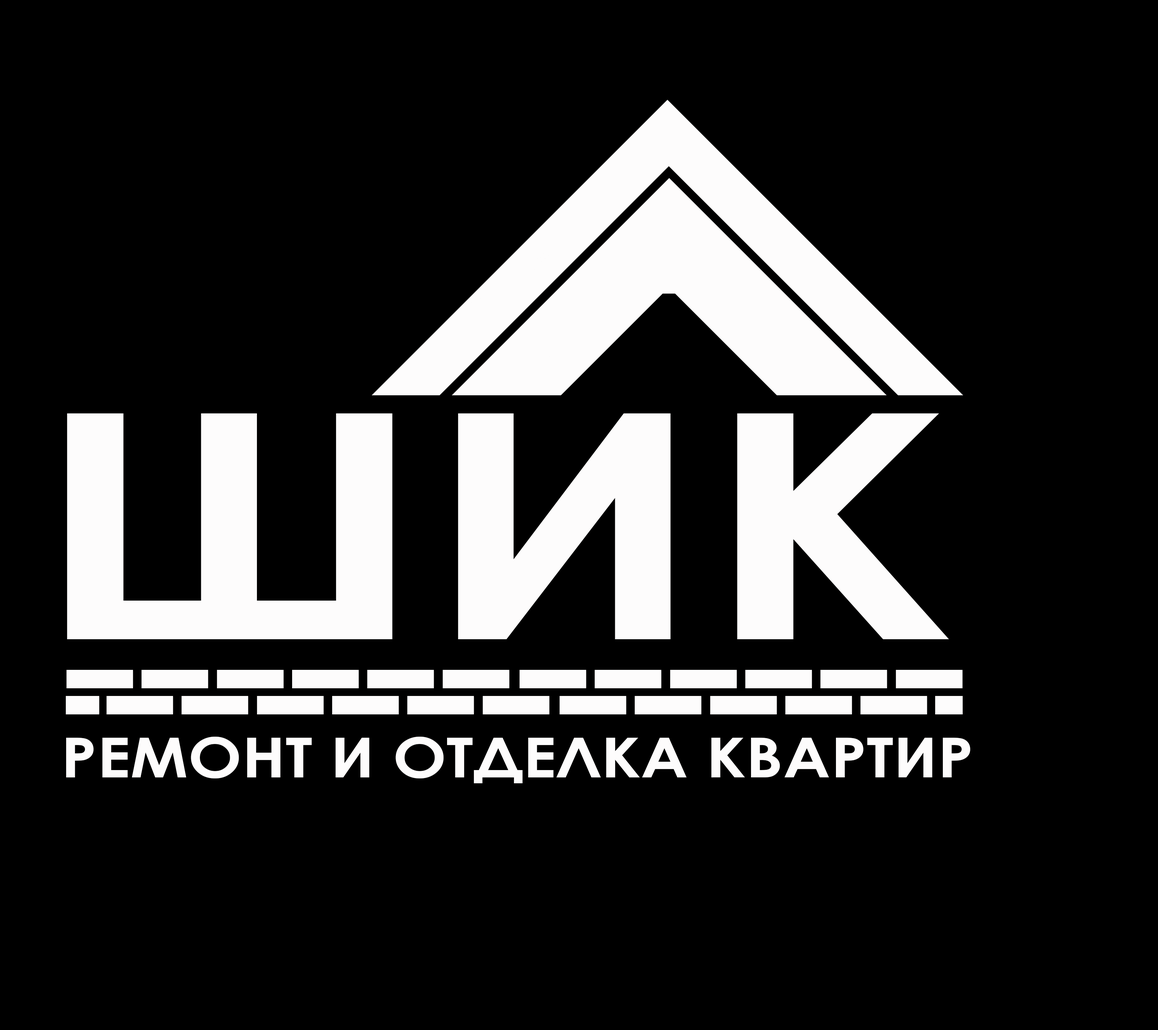
<style>
.page{position:relative;width:1158px;height:1030px;background:#000000}
.page>*{position:absolute;margin:0}
.t1{font:314.5px "CenturyGothic-Bold";color:#fdfcfc;scale:1.29 1}
.t2{font:55.2px "CenturyGothic-Bold";color:#fdfcfc;scale:1.16 1}
</style>
<div class="page">
<p class="t1" style="left:67px;top:413px;width:882px;height:226px">ШИК</p>
<p class="t2" style="left:66px;top:737px;width:904px;height:46px">РЕМОНТ И ОТДЕЛКА КВАРТИР</p>
</div>
